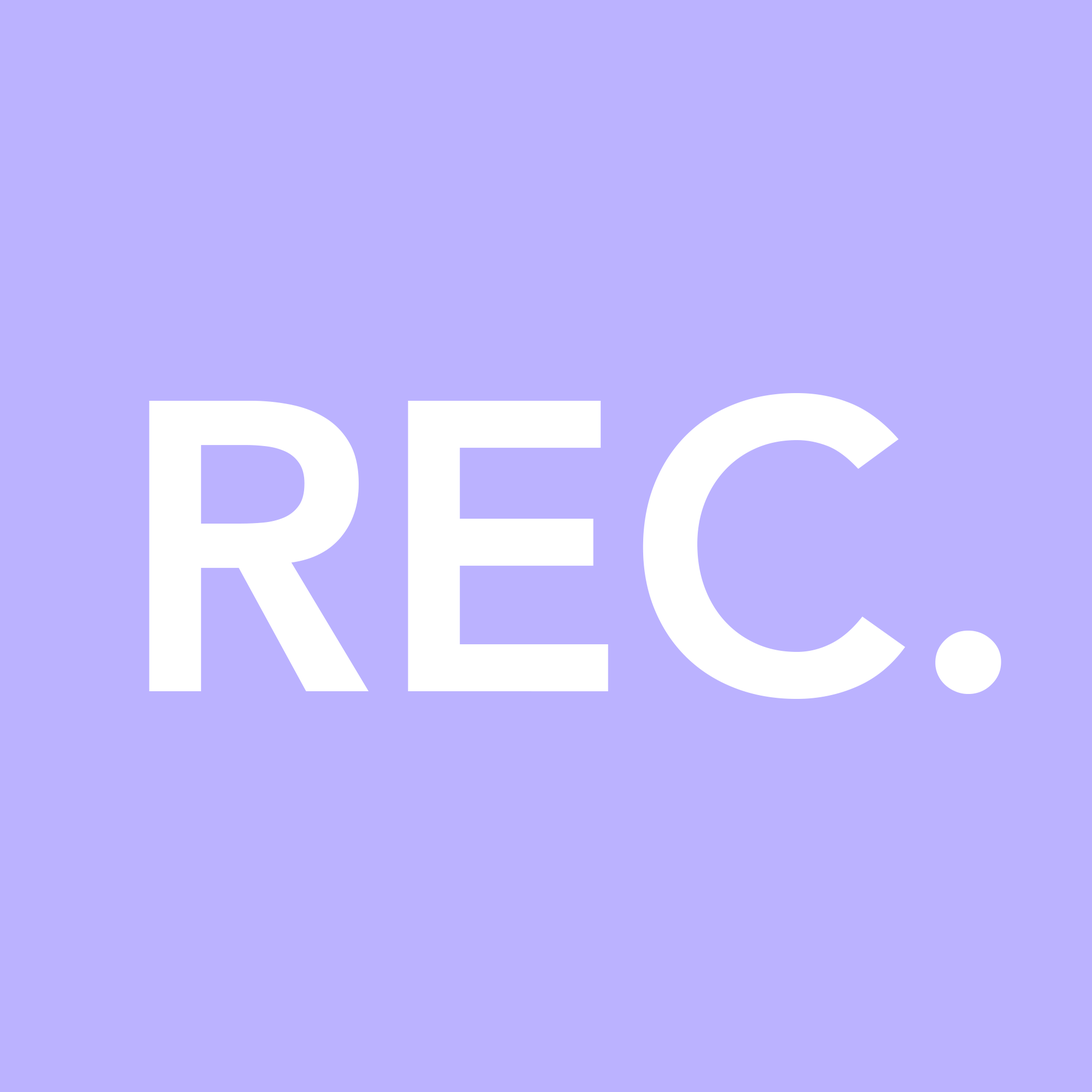
<style>
.page{position:relative;width:1092px;height:1092px;background:#bbb2ff}
.page>*{position:absolute;margin:0}
.t1{font:410.7px "Avenir-Heavy";color:#ffffff}
</style>
<div class="page">
<p class="t1" style="left:149px;top:393px;width:852px;height:306px">REC.</p>
</div>
